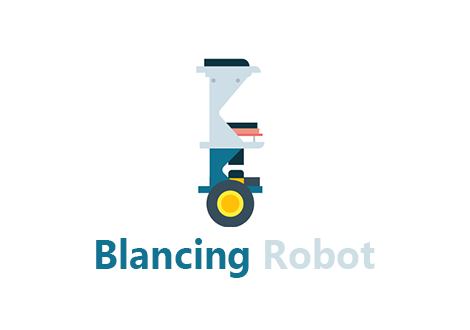
<style>
.page{position:relative;width:470px;height:330px;background:#ffffff}
.page>*{position:absolute;margin:0}
.t1{font:40.6px "MicrosoftNewTaiLue-Bold";color:#107392;scale:0.96 1}
.t2{font:40.6px "MicrosoftNewTaiLue-Bold";color:#cedee5;scale:0.96 1}
</style>
<div class="page">
<p class="t1" style="left:96px;top:238px;width:279px;height:40px">Blancing <span class="t2">Robot</span></p>
</div>
